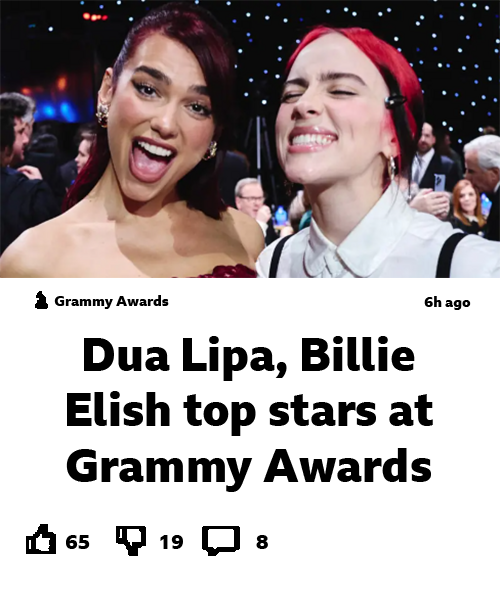
<style>
.page{position:relative;width:500px;height:600px;background:#ffffff}
.page>*{position:absolute;margin:0}
.t1{font:14.3px "BBCReithSans-XBold";color:#000000}
.t2{font:46px "BBCReithSans-XBold";color:#000000}
.t3{font:20px "BBCReithSans-XBold";color:#000000}
</style>
<div class="page">
<p class="t1" style="left:54px;top:295px;width:115px;height:14px">Grammy Awards</p>
<p class="t1" style="left:424px;top:296px;width:47px;height:14px">6h ago</p>
<p class="t2" style="left:66px;top:336px;width:367px;height:156px;text-align:center">Dua Lipa, Billie Elish top stars at Grammy Awards</p>
<p class="t3" style="left:66px;top:535px;width:24px;height:14px">65</p>
<p class="t3" style="left:160px;top:535px;width:23px;height:14px">19</p>
<p class="t3" style="left:256px;top:535px;width:12px;height:14px">8</p>
</div>
